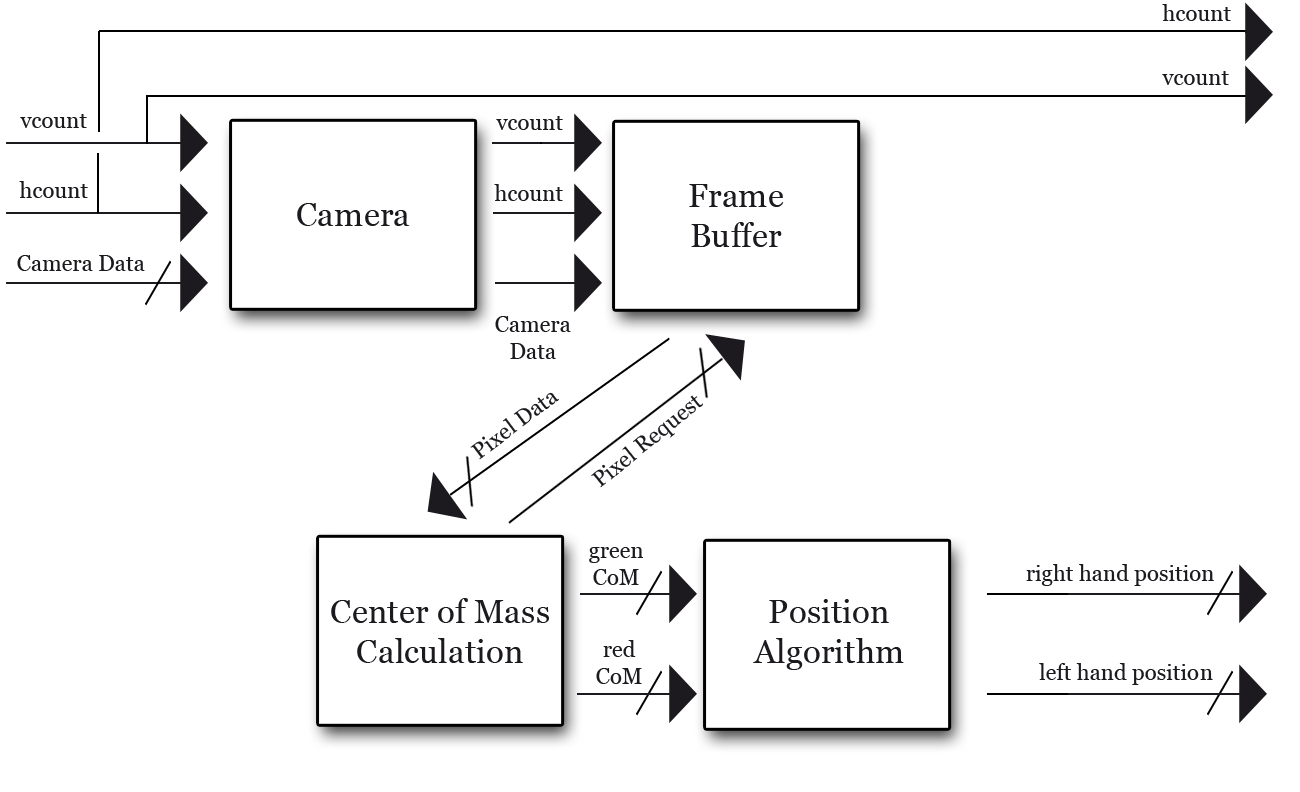
<style>
.page{position:relative;width:1300px;height:792px;background:#ffffff}
.page>*{position:absolute;margin:0}
.t1{font:22.2px "Georgia";color:#1c1a1e}
.t2{font:33.3px "Georgia";color:#1c1a1e}
</style>
<div class="page">
<p class="t1" style="left:1162px;top:4px;width:69px;height:17px">hcount</p>
<p class="t1" style="left:1162px;top:71px;width:67px;height:14px">vcount</p>
<p class="t1" style="left:20px;top:114px;width:67px;height:14px">vcount</p>
<p class="t1" style="left:496px;top:116px;width:67px;height:14px">vcount</p>
<p class="t1" style="left:19px;top:181px;width:69px;height:17px">hcount</p>
<p class="t1" style="left:494px;top:184px;width:69px;height:17px">hcount</p>
<p class="t2" style="left:689px;top:184px;width:95px;height:63px;text-align:center">Frame<br>Buffer</p>
<p class="t2" style="left:297px;top:203px;width:113px;height:23px">Camera</p>
<p class="t1" style="left:17px;top:255px;width:128px;height:16px">Camera Data</p>
<p class="t1" style="left:495px;top:316px;width:76px;height:43px;text-align:center">Camera<br>Data</p>
<p class="t1" style="left:470px;top:392px;width:89px;height:68px;rotate:-37deg">Pixel Data</p>
<p class="t1" style="left:591px;top:395px;width:112px;height:93px;rotate:-39deg">Pixel Request</p>
<p class="t1" style="left:589px;top:547px;width:55px;height:38px;text-align:center">green<br>CoM</p>
<p class="t1" style="left:1026px;top:564px;width:188px;height:22px">right hand position</p>
<p class="t2" style="left:331px;top:598px;width:218px;height:65px;text-align:center">Center of Mass<br>Calculation</p>
<p class="t2" style="left:753px;top:599px;width:151px;height:71px;text-align:center">Position<br>Algorithm</p>
<p class="t1" style="left:596px;top:640px;width:46px;height:44px;text-align:center">red<br>CoM</p>
<p class="t1" style="left:1039px;top:663px;width:174px;height:22px">left hand position</p>
</div>
